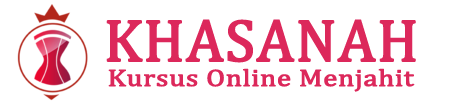
<style>
.page{position:relative;width:450px;height:105px;background:#ffffff}
.page>*{position:absolute;margin:0}
.t1{font:60px "Cambria";color:#dc285b;font-weight:bold}
.t2{font:24px "Cambria";color:#dc285b;font-weight:bold;scale:1.2 1}
</style>
<div class="page">
<p class="t1" style="left:106px;top:19px;width:310px;height:44px">KHASANAH</p>
<p class="t2" style="left:108px;top:68px;width:307px;height:24px">Kursus Online Menjahit</p>
</div>
